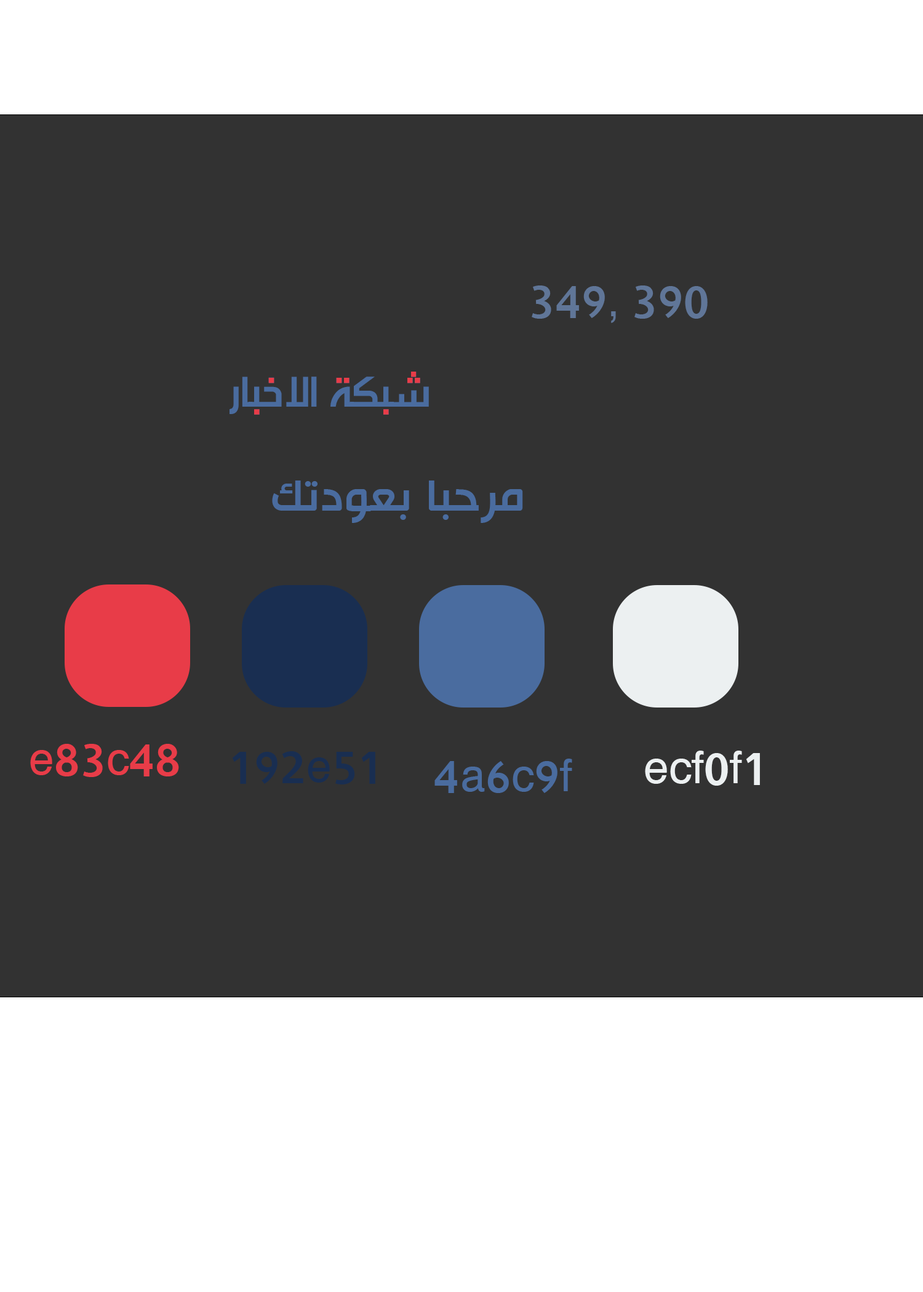
<style>
.page{position:relative;width:923px;height:1292px;background:#323232}
.page>*{position:absolute;margin:0}
.t1{font:51.3px "HacenTunisia";letter-spacing:0.01em;color:#607698}
.t2{font:51.3px "AlarabiyaFont-Normal";letter-spacing:0.01em;color:#4a6c9f}
.t3{font:51.3px "HacenTunisia";letter-spacing:0.01em;color:#4a6c9f}
.t4{font:51.3px "HacenTunisia";letter-spacing:0.01em;color:#e83c48}
.t5{font:51.3px "HacenTunisia";letter-spacing:0.01em;color:#192e51}
.t6{font:51.3px "HacenTunisia";letter-spacing:0.01em;color:#ecf0f1}
</style>
<div class="page">
<p class="t1" style="left:532px;top:285px;width:176px;height:38px">349, 390</p>
<p class="t2" style="left:229px;top:372px;width:200px;height:43px">شبكة الاخبار</p>
<p class="t3" style="left:272px;top:481px;width:251px;height:42px">مرحبا بعودتك</p>
<p class="t4" style="left:30px;top:744px;width:149px;height:33px">e83c48</p>
<p class="t5" style="left:232px;top:751px;width:143px;height:33px">192e51</p>
<p class="t3" style="left:434px;top:759px;width:138px;height:34px">4a6c9f</p>
<p class="t6" style="left:645px;top:751px;width:115px;height:35px">ecf0f1</p>
</div>
